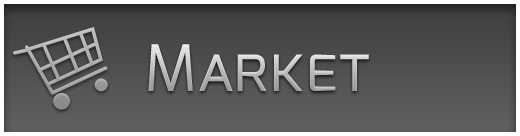
<style>
.page{position:relative;width:520px;height:136px}
.page>*{position:absolute;margin:0}
.t1{font:64px "Exo-Regular";font-variant:small-caps}
</style>
<div class="page">
<p class="t1" style="left:148px;top:44px;width:221px;height:48px">Market</p>
</div>
